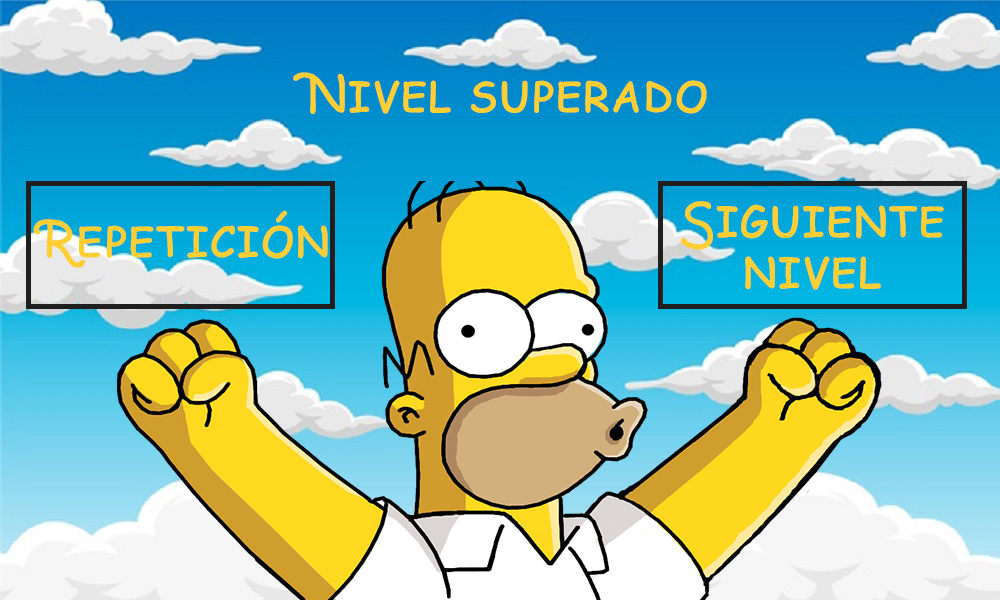
<style>
.page{position:relative;width:1000px;height:600px}
.page>*{position:absolute;margin:0}
.t1{font:50px "ComicSansMS";letter-spacing:0.02em;color:#ffce33}
</style>
<div class="page">
<p class="t1" style="left:293px;top:72px;width:414px;height:42px">Nivel superado</p>
<p class="t1" style="left:681px;top:201px;width:263px;height:49px">Siguiente</p>
<p class="t1" style="left:33px;top:210px;width:295px;height:58px">Repetición</p>
<p class="t1" style="left:745px;top:256px;width:136px;height:34px">nivel</p>
</div>
